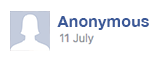
<style>
.page{position:relative;width:152px;height:60px;background:#ffffff}
.page>*{position:absolute;margin:0}
.t1{font:16.3px "HelveticaNeue-Bold";color:#3b5998}
</style>
<div class="page">
<p class="t1" style="left:57px;top:16px;width:92px;height:14px">Anonymous</p>
</div>
